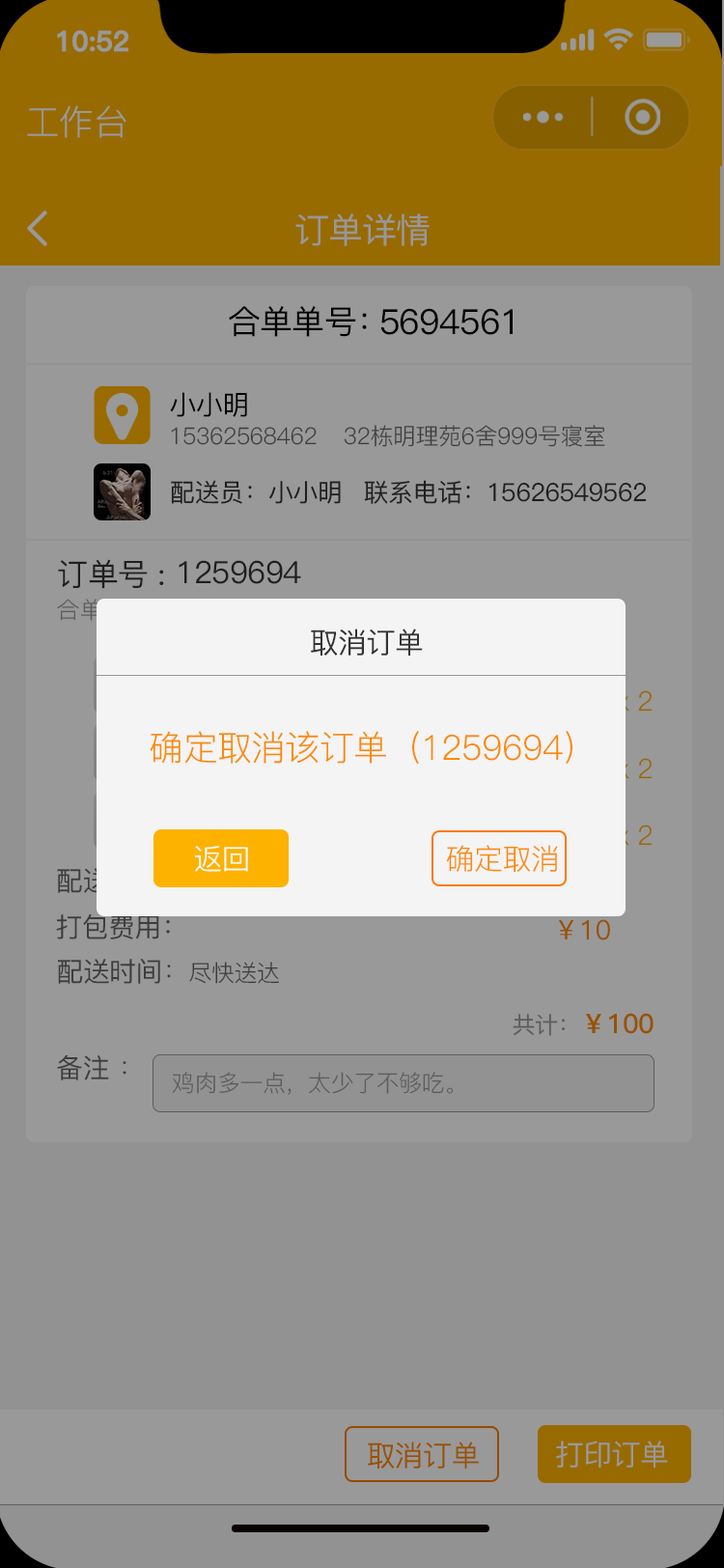
<style>
.page{position:relative;width:724px;height:1568px;background:#999999}
.page>*{position:absolute;margin:0}
.t1{font:27.5px "PingFang-SC-Bold";letter-spacing:-0.02em;color:#999999;font-weight:bold}
.t2{font:34.8px "PingFang-SC-Regular";letter-spacing:-0.02em;color:#999999}
.t3{font:34.8px "PingFang-SC-Medium";letter-spacing:-0.02em;color:#989898}
.t4{font:32.8px "PingFang-SC-Medium";letter-spacing:-0.02em;color:#000000}
.t5{font:34.8px "PingFang-SC-Medium";letter-spacing:-0.02em;color:#000000}
.t6{font:27px "PingFang-SC-Medium";letter-spacing:-0.02em;color:#000000}
.t7{font:23.2px "PingFang-SC-Regular";letter-spacing:-0.02em;color:#3d3d3d}
.t8{font:25.1px "PingFang-SC-Medium";letter-spacing:-0.02em;color:#333333}
.t9{font:30.9px "PingFang-SC-Medium";letter-spacing:-0.02em;color:#333333}
.t10{font:29px "PingFang-SC-Medium";letter-spacing:-0.02em;color:#333333}
.t11{font:27px "PingFang-SC-Regular";letter-spacing:-0.02em;color:#986a00}
.t12{font:34.8px "PingFang-SC-Regular";letter-spacing:-0.02em;color:#fd8900}
.t13{font:29px "PingFang-SC-Regular";letter-spacing:-0.02em;color:#ffffff}
.t14{font:29px "PingFang-SC-Regular";letter-spacing:-0.02em;color:#fd8900}
.t15{font:27px "PingFang-SC-Medium";letter-spacing:-0.02em;color:#3d3d3d}
.t16{font:27px "PingFang-SC-Medium";letter-spacing:-0.02em;color:#985200}
.t17{font:27px "PingFang-SC-Regular";letter-spacing:-0.02em;color:#3d3d3d}
.t18{font:27px "PingFang-SC-Bold";letter-spacing:-0.02em;color:#985200}
.t19{font:23.2px "PingFang-SC-Medium";letter-spacing:-0.02em;color:#985200}
.t20{font:23.2px "PingFang-SC-Regular";letter-spacing:-0.02em;color:#5c5c5c}
.t21{font:29px "PingFang-SC-Medium";letter-spacing:-0.02em;color:#985200}
.t22{font:29px "PingFang-SC-Medium";letter-spacing:-0.02em;color:#999999}
</style>
<div class="page">
<p class="t1" style="left:57px;top:30px;width:71px;height:22px">10:52</p>
<p class="t2" style="left:27px;top:105px;width:99px;height:33px">工作台</p>
<p class="t3" style="left:295px;top:213px;width:135px;height:33px">订单详情</p>
<p class="t4" style="left:229px;top:306px;width:138px;height:31px">合单单号：</p>
<p class="t5" style="left:380px;top:308px;width:133px;height:27px">5694561</p>
<p class="t6" style="left:170px;top:392px;width:77px;height:25px">小小明</p>
<p class="t7" style="left:344px;top:425px;width:261px;height:22px">32栋明理苑6舍999号寝室</p>
<p class="t7" style="left:171px;top:427px;width:146px;height:18px">15362568462</p>
<p class="t8" style="left:171px;top:480px;width:170px;height:24px">配送员：小小明</p>
<p class="t8" style="left:364px;top:480px;width:283px;height:24px">联系电话：15626549562</p>
<p class="t9" style="left:58px;top:559px;width:106px;height:30px">订单号 :</p>
<p class="t9" style="left:179px;top:560px;width:122px;height:24px">1259694</p>
<p class="t10" style="left:311px;top:629px;width:112px;height:27px">取消订单</p>
<p class="t11" style="left:616px;top:690px;width:37px;height:22px">x 2</p>
<p class="t12" style="left:150px;top:731px;width:423px;height:33px">确定取消该订单（1259694）</p>
<p class="t11" style="left:616px;top:758px;width:37px;height:21px">x 2</p>
<p class="t11" style="left:616px;top:825px;width:37px;height:21px">x 2</p>
<p class="t13" style="left:194px;top:846px;width:54px;height:26px">返回</p>
<p class="t14" style="left:446px;top:845px;width:112px;height:28px">确定取消</p>
<p class="t15" style="left:56px;top:914px;width:114px;height:25px">打包费用：</p>
<p class="t16" style="left:558px;top:919px;width:52px;height:21px">￥10</p>
<p class="t15" style="left:58px;top:959px;width:221px;height:25px">配送时间<span class="t17">：</span><span class="t7">尽快送达</span></p>
<p class="t18" style="left:513px;top:1013px;width:141px;height:23px"><span class="t19">共计：</span>￥100</p>
<p class="t15" style="left:57px;top:1054px;width:69px;height:26px">备注 <span class="t17">：</span></p>
<p class="t20" style="left:172px;top:1072px;width:282px;height:23px">鸡肉多一点，太少了不够吃。</p>
<p class="t21" style="left:368px;top:1442px;width:111px;height:27px">取消订单</p>
<p class="t22" style="left:556px;top:1441px;width:112px;height:27px">打印订单</p>
</div>
